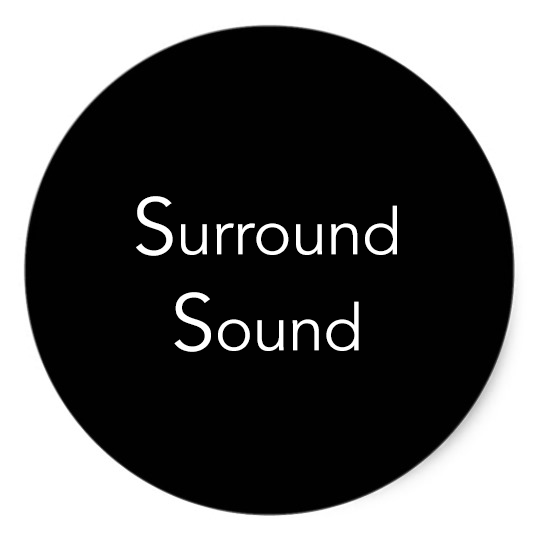
<style>
.page{position:relative;width:540px;height:540px;background:#010101}
.page>*{position:absolute;margin:0}
.t1{font:64px "Avenir-Book";color:#ffffff}
.t2{font:80px "Avenir-Book";color:#ffffff}
</style>
<div class="page">
<p class="t1" style="left:136px;top:196px;width:261px;height:156px;text-align:center"><span class="t2">S</span>urround<br><span class="t2">S</span>ound</p>
</div>
